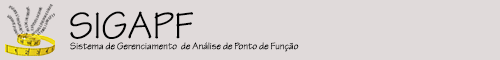
<style>
.page{position:relative;width:500px;height:60px;background:#e0dada}
.page>*{position:absolute;margin:0}
.t1{font:40px "TektonPro-Regular";color:#020202}
.t2{font:10px "TektonPro-Regular";color:#020202}
</style>
<div class="page">
<p class="t1" style="left:70px;top:11px;width:123px;height:28px">SIGAPF</p>
<p class="t2" style="left:70px;top:42px;width:229px;height:10px">Sistema de Gerenciamento  de Análise de Ponto de Função</p>
</div>
